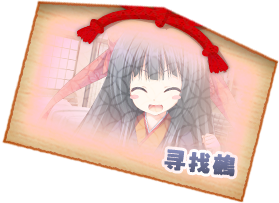
<style>
.page{position:relative;width:279px;height:203px;background:#ffffff}
.page>*{position:absolute;margin:0}
.t1{font:24px "MaokenAssortedSans";color:#6c7095;font-weight:bold}
</style>
<div class="page">
<p class="t1" style="left:164px;top:149px;width:71px;height:28px;rotate:6deg">寻找鵺</p>
</div>
